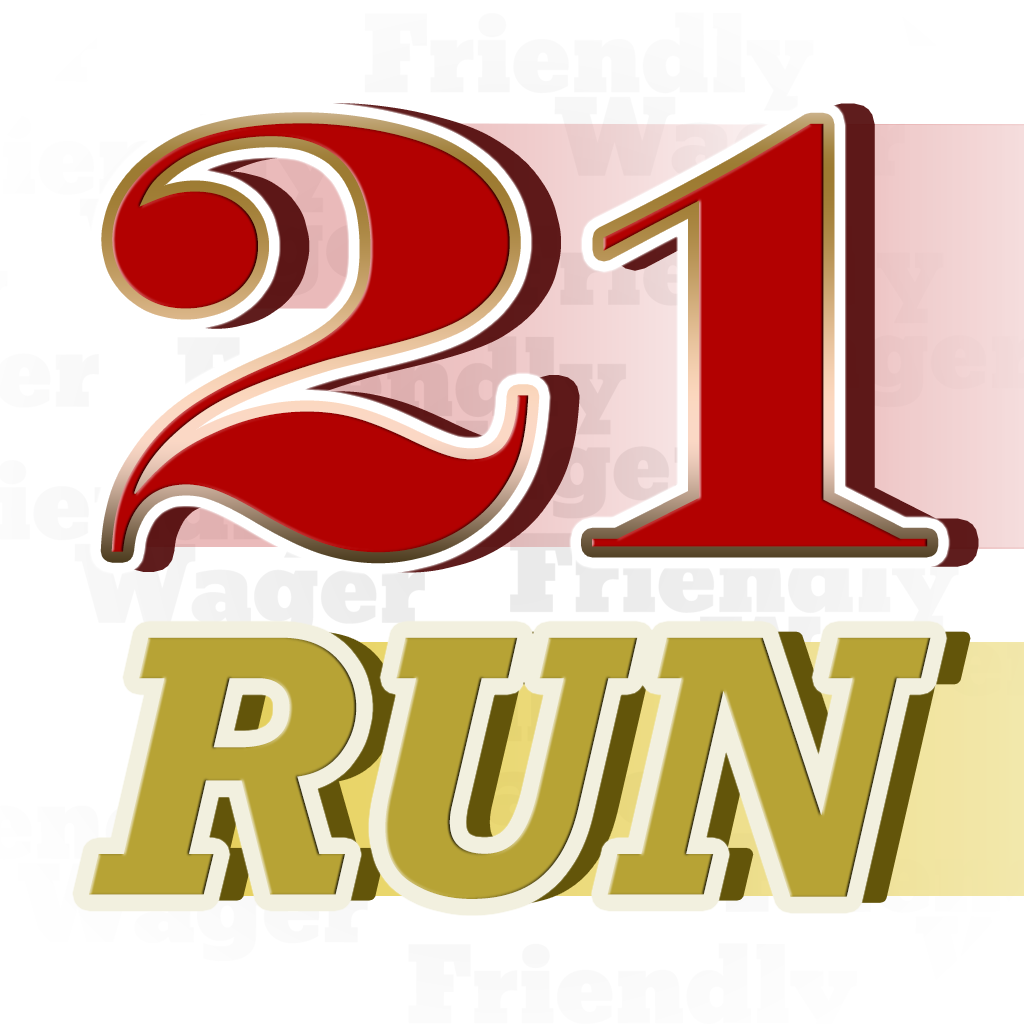
<style>
.page{position:relative;width:1024px;height:1024px;background:#ffffff}
.page>*{position:absolute;margin:0}
.t1{font:611.3px "EngraversMT-Bold";color:#b20101}
.t2{font:377.7px "Rockwell-BoldItalic";color:#b7a335}
</style>
<div class="page">
<p class="t1" style="left:111px;top:123px;width:817px;height:430px">21</p>
<p class="t2" style="left:89px;top:637px;width:842px;height:262px">RUN</p>
</div>
